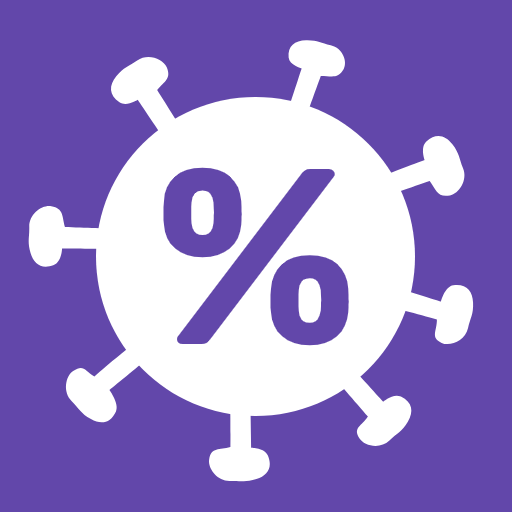
<style>
.page{position:relative;width:512px;height:512px;background:#6247aa}
.page>*{position:absolute;margin:0}
.t1{font:250px "Rubik-Bold";color:#6247aa}
</style>
<div class="page">
<p class="t1" style="left:163px;top:167px;width:186px;height:179px">%</p>
</div>
